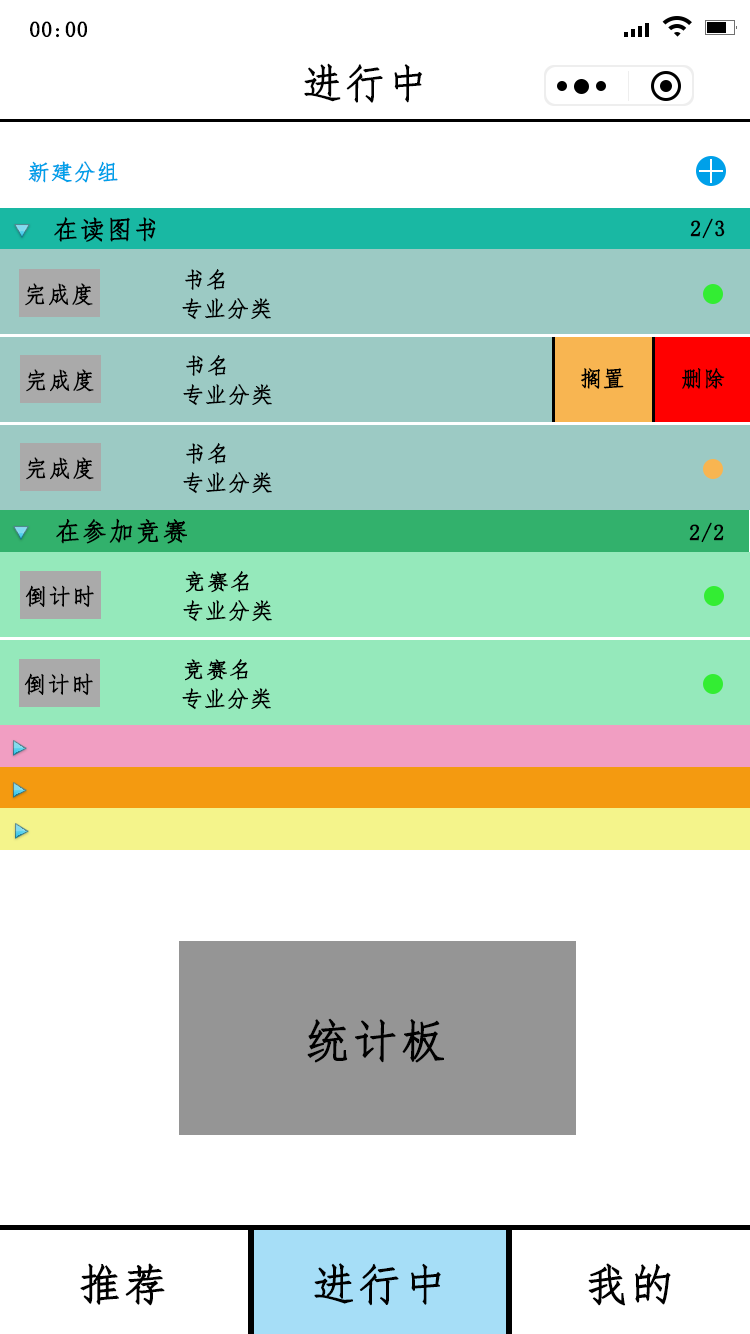
<style>
.page{position:relative;width:750px;height:1334px;background:#ffffff}
.page>*{position:absolute;margin:0}
.t1{font:21.7px "FangSong";letter-spacing:0.02em;color:#000000;font-weight:bold}
.t2{font:40.7px "FangSong";letter-spacing:0.02em;color:#000000;font-weight:bold}
.t3{font:22px "FangSong";letter-spacing:0.02em;color:#00a0e9;font-weight:bold}
.t4{font:25.7px "FangSong";letter-spacing:0.02em;color:#000000;font-weight:bold}
.t5{font:22px "FangSong";letter-spacing:0.02em;color:#000000;font-weight:bold}
.t6{font:22.7px "FangSong";letter-spacing:0.02em;color:#000000;font-weight:bold}
.t7{font:46px "FangSong";letter-spacing:0.02em;color:#000000;font-weight:bold}
.t8{font:43.7px "FangSong";letter-spacing:0.02em;color:#000000;font-weight:bold}
</style>
<div class="page">
<p class="t1" style="left:30px;top:21px;width:57px;height:17px">00:00</p>
<p class="t2" style="left:304px;top:63px;width:119px;height:40px">进行中</p>
<p class="t3" style="left:28px;top:161px;width:90px;height:22px">新建分组</p>
<p class="t4" style="left:54px;top:217px;width:102px;height:25px">在读图书</p>
<p class="t5" style="left:690px;top:218px;width:35px;height:21px">2/3</p>
<p class="t5" style="left:185px;top:269px;width:40px;height:21px">书名</p>
<p class="t6" style="left:25px;top:283px;width:68px;height:23px">完成度</p>
<p class="t5" style="left:182px;top:298px;width:89px;height:22px">专业分类</p>
<p class="t5" style="left:186px;top:355px;width:40px;height:21px">书名</p>
<p class="t6" style="left:26px;top:369px;width:68px;height:23px">完成度</p>
<p class="t5" style="left:581px;top:368px;width:43px;height:21px">搁置</p>
<p class="t5" style="left:682px;top:367px;width:43px;height:22px">删除</p>
<p class="t5" style="left:183px;top:384px;width:89px;height:22px">专业分类</p>
<p class="t5" style="left:186px;top:443px;width:40px;height:21px">书名</p>
<p class="t6" style="left:26px;top:457px;width:68px;height:23px">完成度</p>
<p class="t5" style="left:183px;top:472px;width:89px;height:22px">专业分类</p>
<p class="t4" style="left:56px;top:518px;width:131px;height:26px">在参加竞赛</p>
<p class="t5" style="left:689px;top:522px;width:35px;height:21px">2/2</p>
<p class="t5" style="left:185px;top:571px;width:64px;height:22px">竞赛名</p>
<p class="t6" style="left:25px;top:585px;width:69px;height:23px">倒计时</p>
<p class="t5" style="left:183px;top:600px;width:89px;height:22px">专业分类</p>
<p class="t5" style="left:184px;top:659px;width:64px;height:22px">竞赛名</p>
<p class="t6" style="left:24px;top:673px;width:69px;height:23px">倒计时</p>
<p class="t5" style="left:182px;top:688px;width:89px;height:22px">专业分类</p>
<p class="t7" style="left:307px;top:1018px;width:137px;height:45px">统计板</p>
<p class="t8" style="left:80px;top:1263px;width:85px;height:43px">推荐</p>
<p class="t8" style="left:314px;top:1263px;width:127px;height:43px">进行中</p>
<p class="t8" style="left:588px;top:1263px;width:83px;height:43px">我的</p>
</div>
